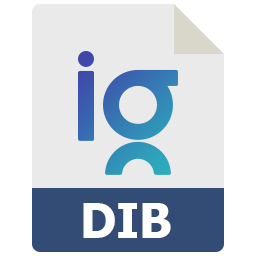
<style>
.page{position:relative;width:256px;height:256px;background:#eaeaea}
.page>*{position:absolute;margin:0}
.t1{font:48px "Tahoma-Bold";color:#ffffff}
</style>
<div class="page">
<p class="t1" style="left:83px;top:203px;width:88px;height:35px">DIB</p>
</div>
